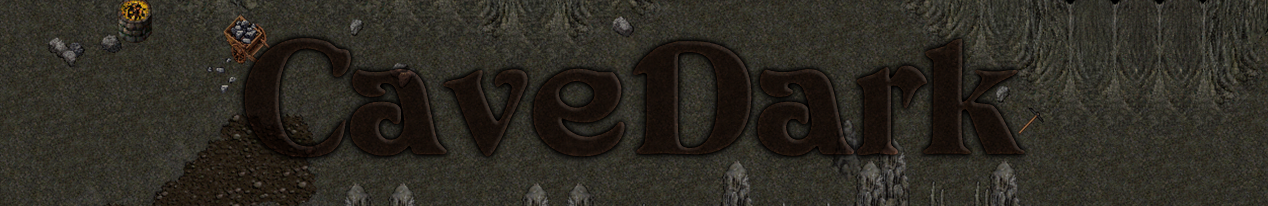
<style>
.page{position:relative;width:1268px;height:206px}
.page>*{position:absolute;margin:0}
.t1{font:156.7px "Avatar";color:#180f0a;scale:1.25 1}
</style>
<div class="page">
<p class="t1" style="left:244px;top:38px;width:781px;height:119px">CaveDark</p>
</div>
